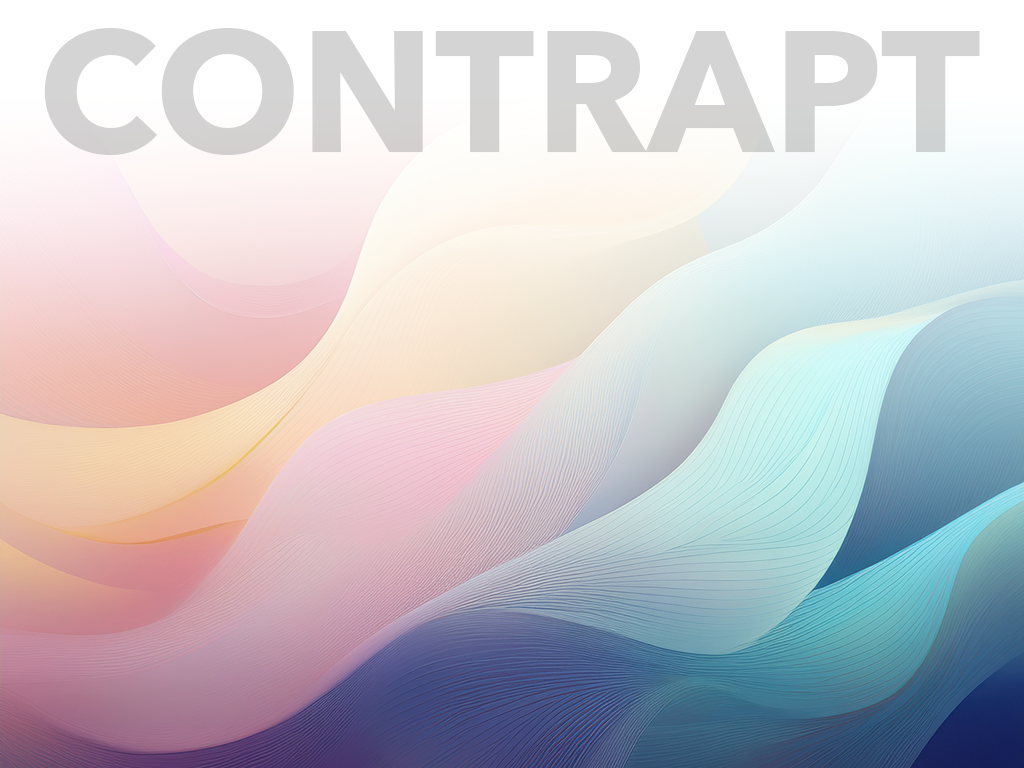
<style>
.page{position:relative;width:1024px;height:768px}
.page>*{position:absolute;margin:0}
.t1{font:171px "AvenirNext-Bold";color:#d4d4d4}
</style>
<div class="page">
<p class="t1" style="left:44px;top:28px;width:936px;height:127px">CONTRAPT</p>
</div>
